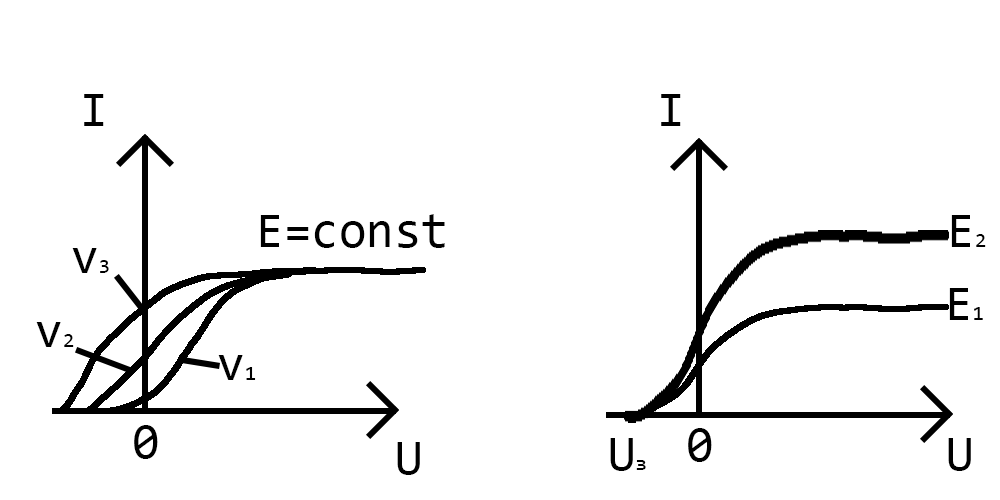
<style>
.page{position:relative;width:1000px;height:500px;background:#ffffff}
.page>*{position:absolute;margin:0}
.t1{font:50px "Consolas";color:#000000}
.t2{font:20.8px "Consolas";color:#000000}
</style>
<div class="page">
<p class="t1" style="left:84px;top:94px;width:20px;height:32px">I</p>
<p class="t1" style="left:661px;top:94px;width:20px;height:32px">I</p>
<p class="t1" style="left:260px;top:214px;width:185px;height:34px">E=const</p>
<p class="t1" style="left:951px;top:215px;width:35px;height:32px">E<span class="t2">2</span></p>
<p class="t1" style="left:72px;top:248px;width:37px;height:25px">v<span class="t2">3</span></p>
<p class="t1" style="left:949px;top:288px;width:34px;height:32px">E<span class="t2">1</span></p>
<p class="t1" style="left:36px;top:322px;width:38px;height:25px">v<span class="t2">2</span></p>
<p class="t1" style="left:218px;top:355px;width:38px;height:25px">v<span class="t2">1</span></p>
<p class="t1" style="left:134px;top:425px;width:24px;height:34px">0</p>
<p class="t1" style="left:610px;top:438px;width:36px;height:33px">U<span class="t2">з</span></p>
<p class="t1" style="left:688px;top:428px;width:24px;height:34px">0</p>
<p class="t1" style="left:948px;top:438px;width:23px;height:33px">U</p>
<p class="t1" style="left:397px;top:442px;width:23px;height:33px">U</p>
</div>
